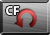
<style>
.page{position:relative;width:50px;height:35px}
.page>*{position:absolute;margin:0}
.t1{font:12px "MyriadPro-Bold";color:#ffffff}
</style>
<div class="page">
<p class="t1" style="left:6px;top:6px;width:14px;height:9px">CF</p>
</div>
